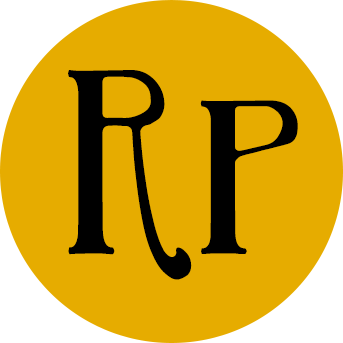
<style>
.page{position:relative;width:343px;height:343px;background:#e6ac00}
.page>*{position:absolute;margin:0}
.t1{font:220.9px "Birmingham";color:#000000}
</style>
<div class="page">
<p class="t1" style="left:68px;top:70px;width:230px;height:210px">Rp</p>
</div>
